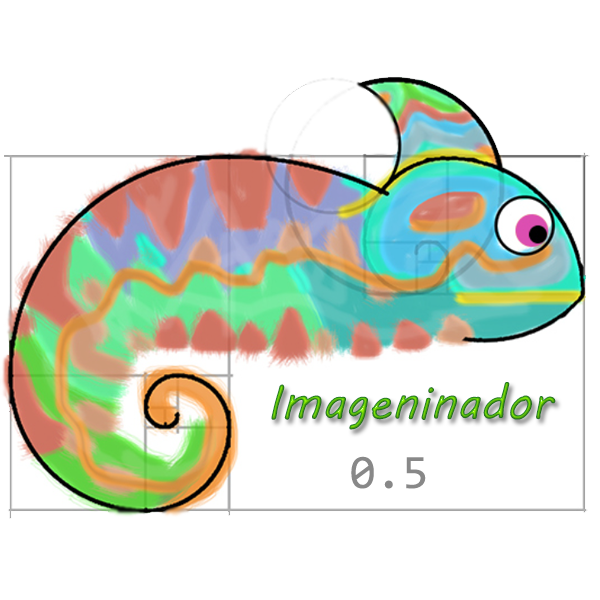
<style>
.page{position:relative;width:600px;height:600px;background:#ffffff}
.page>*{position:absolute;margin:0}
.t1{font:47.7px "MVBoli"}
.t2{font:48px "Consolas";color:#888888}
</style>
<div class="page">
<p class="t1" style="left:271px;top:382px;width:285px;height:48px">Imageninador</p>
<p class="t2" style="left:351px;top:456px;width:75px;height:33px">0.5</p>
</div>
